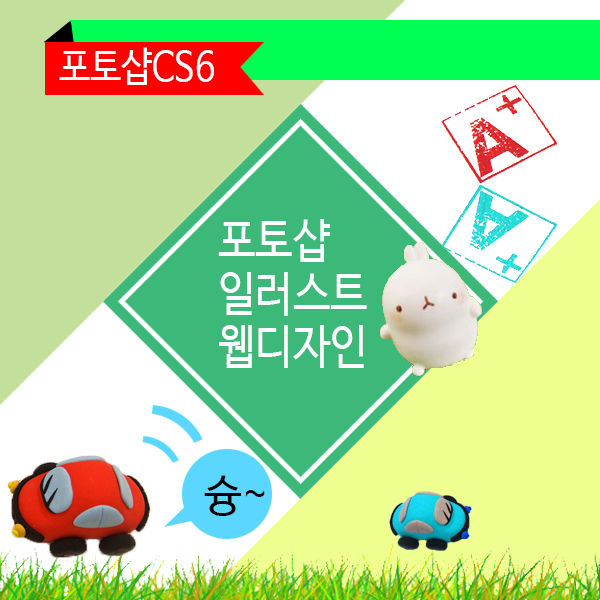
<style>
.page{position:relative;width:600px;height:600px;background:#ffffff}
.page>*{position:absolute;margin:0}
.t1{font:40.7px "NanumBarunGothic";color:#ffffff;scale:0.85 1}
.t2{font:48.4px "NanumBarunGothic";color:#ffffff;scale:0.86 1}
.t3{font:45px "NanumBarunGothic";color:#000000;scale:0.92 1}
</style>
<div class="page">
<p class="t1" style="left:59px;top:47px;width:155px;height:38px">포토샵CS6</p>
<p class="t2" style="left:218px;top:219px;width:149px;height:149px">포토샵<br>일러스트<br>웹디자인</p>
<p class="t3" style="left:204px;top:475px;width:61px;height:41px">슝~</p>
</div>
